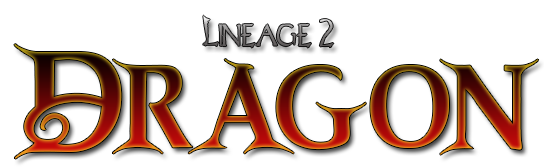
<style>
.page{position:relative;width:544px;height:168px;background:#ffffff}
.page>*{position:absolute;margin:0}
.t1{font:36.7px "Lineage2Font";scale:0.89 1}
.t2{font:154px "DragonFREE";scale:1.13 1}
</style>
<div class="page">
<p class="t1" style="left:203px;top:15px;width:131px;height:33px">Lineage 2</p>
<p class="t2" style="left:14px;top:44px;width:525px;height:115px">Dragon</p>
</div>
